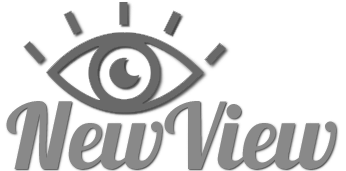
<style>
.page{position:relative;width:346px;height:171px;background:#ffffff}
.page>*{position:absolute;margin:0}
.t1{font:91px "Lobster1.3";color:#898989}
</style>
<div class="page">
<p class="t1" style="left:6px;top:101px;width:330px;height:68px">NewView</p>
</div>
